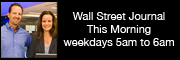
<style>
.page{position:relative;width:180px;height:60px;background:#000000}
.page>*{position:absolute;margin:0}
.t1{font:11px "HelveticaNeue";color:#ffffff}
</style>
<div class="page">
<p class="t1" style="left:63px;top:12px;width:111px;height:36px;text-align:center">Wall Street Journal<br>This Morning<br>weekdays 5am to 6am</p>
</div>
